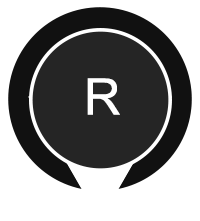
<style>
.page{position:relative;width:200px;height:221px;background:#ffffff}
.page>*{position:absolute;margin:0}
.t1{font:50.7px "ArialMT";color:#ffffff}
</style>
<div class="page">
<p class="t1" style="left:87px;top:78px;width:33px;height:37px">R</p>
</div>
